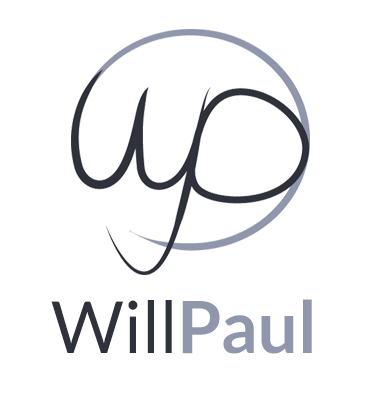
<style>
.page{position:relative;width:382px;height:393px;background:#ffffff}
.page>*{position:absolute;margin:0}
.t1{font:71.8px "Lato-Regular";color:#30323b}
.t2{font:71.8px "Lato-Bold";color:#9097ad}
</style>
<div class="page">
<p class="t1" style="left:51px;top:299px;width:261px;height:55px">Will<span class="t2">Paul</span></p>
</div>
